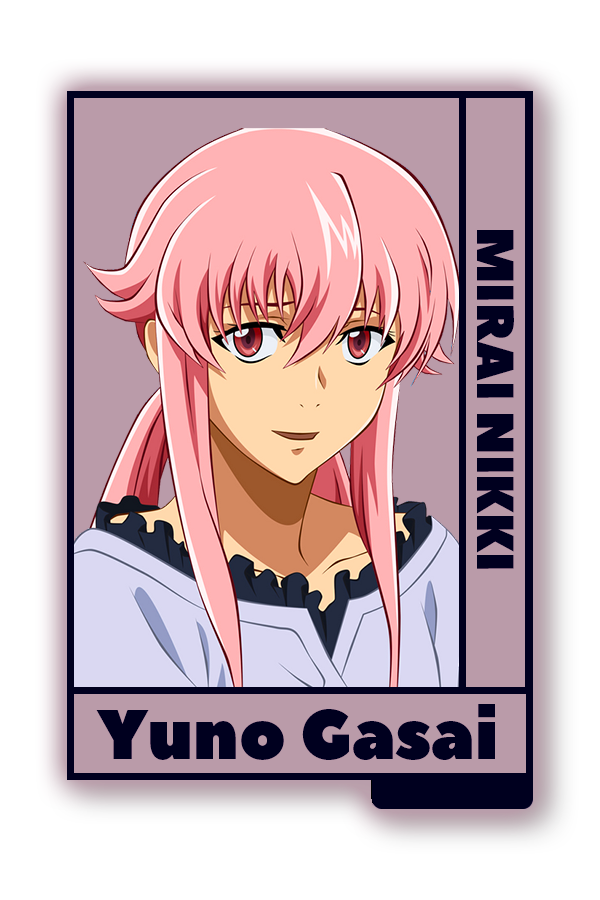
<style>
.page{position:relative;width:600px;height:900px;background:#ffffff}
.page>*{position:absolute;margin:0}
.t1{font:52px "PeaceSans";color:#00001b}
.t2{font:70.1px "PeaceSans";color:#00001b}
</style>
<div class="page">
<p class="t1" style="left:477px;top:230px;width:37px;height:339px;rotate:90deg">MIRAI NIKKI</p>
<p class="t2" style="left:96px;top:704px;width:399px;height:56px">Yuno Gasai</p>
</div>
